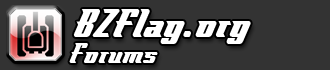
<style>
.page{position:relative;width:330px;height:70px;background:#333333}
.page>*{position:absolute;margin:0}
.t1{font:43px "FlyboyBB";color:#ffffff}
.t2{font:30px "FlyboyBB";color:#ffffff}
</style>
<div class="page">
<p class="t1" style="left:73px;top:9px;width:178px;height:35px">BZFlag.org</p>
<p class="t2" style="left:69px;top:43px;width:89px;height:20px">Forums</p>
</div>
